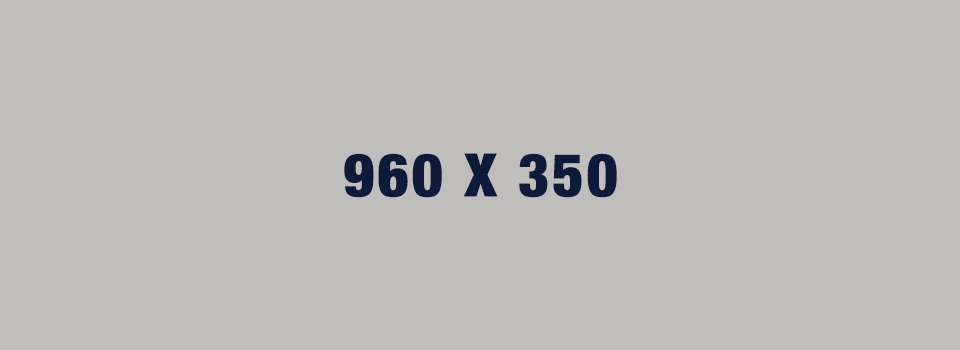
<style>
.page{position:relative;width:960px;height:350px;background:#c0bdbd}
.page>*{position:absolute;margin:0}
.t1{font:60px "HelveticaNeue-CondensedBlack";letter-spacing:0.05em;color:#0d1a39}
</style>
<div class="page">
<p class="t1" style="left:344px;top:153px;width:273px;height:45px">960 X 350</p>
</div>
